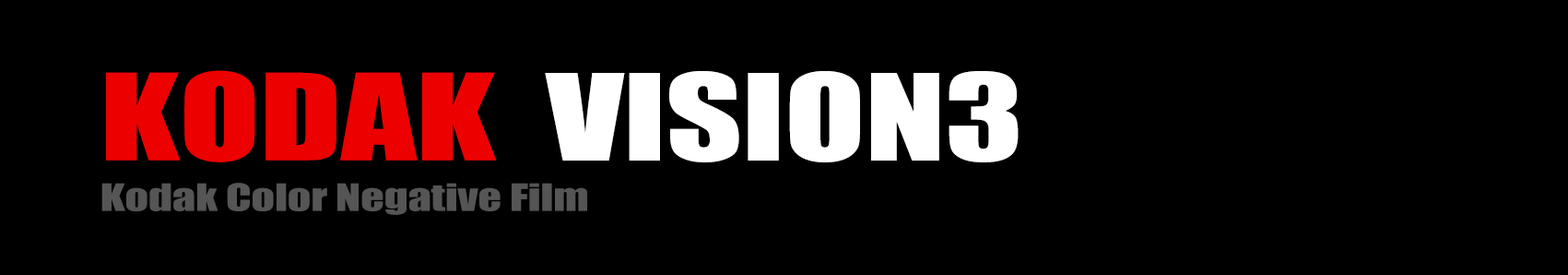
<style>
.page{position:relative;width:1568px;height:275px;background:#000000}
.page>*{position:absolute;margin:0}
.t1{font:110.6px "Impact";color:#ed0000;scale:1.33 1}
.t2{font:110.6px "Impact";color:#ffffff;scale:1.33 1}
.t3{font:34.6px "Impact";color:#555555;scale:1.33 1}
</style>
<div class="page">
<p class="t1" style="left:106px;top:70px;width:391px;height:92px">KODAK</p>
<p class="t2" style="left:545px;top:71px;width:474px;height:91px">VISION3</p>
<p class="t3" style="left:101px;top:183px;width:486px;height:32px">Kodak Color Negative Film</p>
</div>
